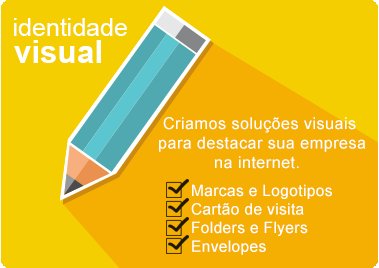
<style>
.page{position:relative;width:379px;height:268px;background:#f4ce01}
.page>*{position:absolute;margin:0}
.t1{font:25px "ArialMT";color:#ffffff}
.t2{font:31.6px "Arial-BoldMT";color:#ffffff}
.t3{font:16.3px "ArialMT";letter-spacing:0.025em;color:#ffffff}
.t4{font:15.5px "ArialMT";letter-spacing:0.025em;color:#ffffff}
</style>
<div class="page">
<p class="t1" style="left:14px;top:18px;width:113px;height:18px">identidade</p>
<p class="t2" style="left:14px;top:40px;width:87px;height:23px">visual</p>
<p class="t3" style="left:159px;top:117px;width:207px;height:52px;text-align:center">Criamos soluções visuais <br>para destacar sua empresa<br>na internet.</p>
<p class="t4" style="left:191px;top:184px;width:141px;height:71px">Marcas e Logotipos<br>Cartão de visita<br>Folders e Flyers<br>Envelopes</p>
</div>
